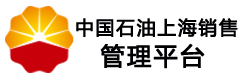
<style>
.page{position:relative;width:244px;height:80px;background:#ffffff}
.page>*{position:absolute;margin:0}
.t1{font:18.7px "MicrosoftYaHei";letter-spacing:0.075em;color:#000003;font-weight:bold}
.t2{font:24px "MicrosoftYaHei";letter-spacing:0.075em;color:#000003;font-weight:bold}
</style>
<div class="page">
<p class="t1" style="left:76px;top:18px;width:162px;height:19px">中国石油上海销售</p>
<p class="t2" style="left:100px;top:43px;width:105px;height:26px">管理平台</p>
</div>
